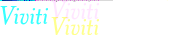
<style>
.page{position:relative;width:179px;height:35px;background:#ffffff}
.page>*{position:absolute;margin:0}
.t1{font:30px "MrsEavesItalic";color:#37ffff}
</style>
<div class="page">
<p class="t1" style="left:0px;top:6px;width:48px;height:19px">Viviti</p>
</div>
